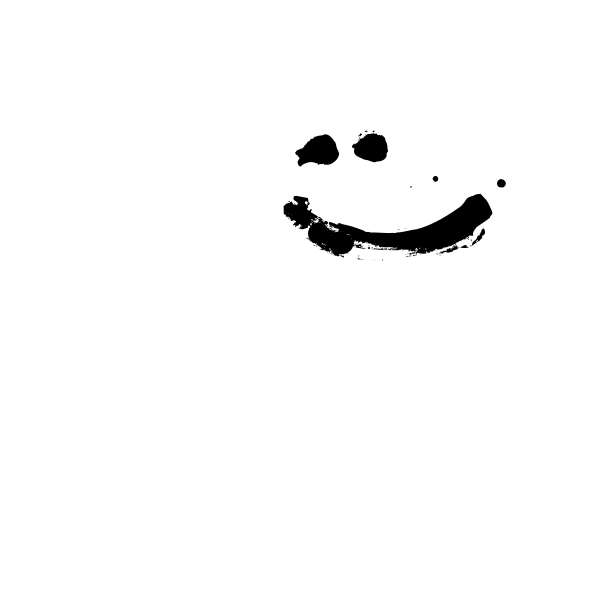
<style>
.page{position:relative;width:600px;height:600px;background:#ffffff}
.page>*{position:absolute;margin:0}
.t1{font:375.6px "YouMurdererBB";color:#000000}
</style>
<div class="page">
<p class="t1" style="left:283px;top:130px;width:223px;height:131px;rotate:88deg">:)</p>
</div>
